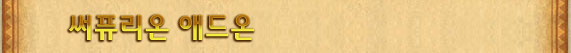
<style>
.page{position:relative;width:571px;height:53px}
.page>*{position:absolute;margin:0}
.t1{font:30px "2002L"}
</style>
<div class="page">
<p class="t1" style="left:69px;top:14px;width:186px;height:26px">써퓨리온 애드온</p>
</div>
